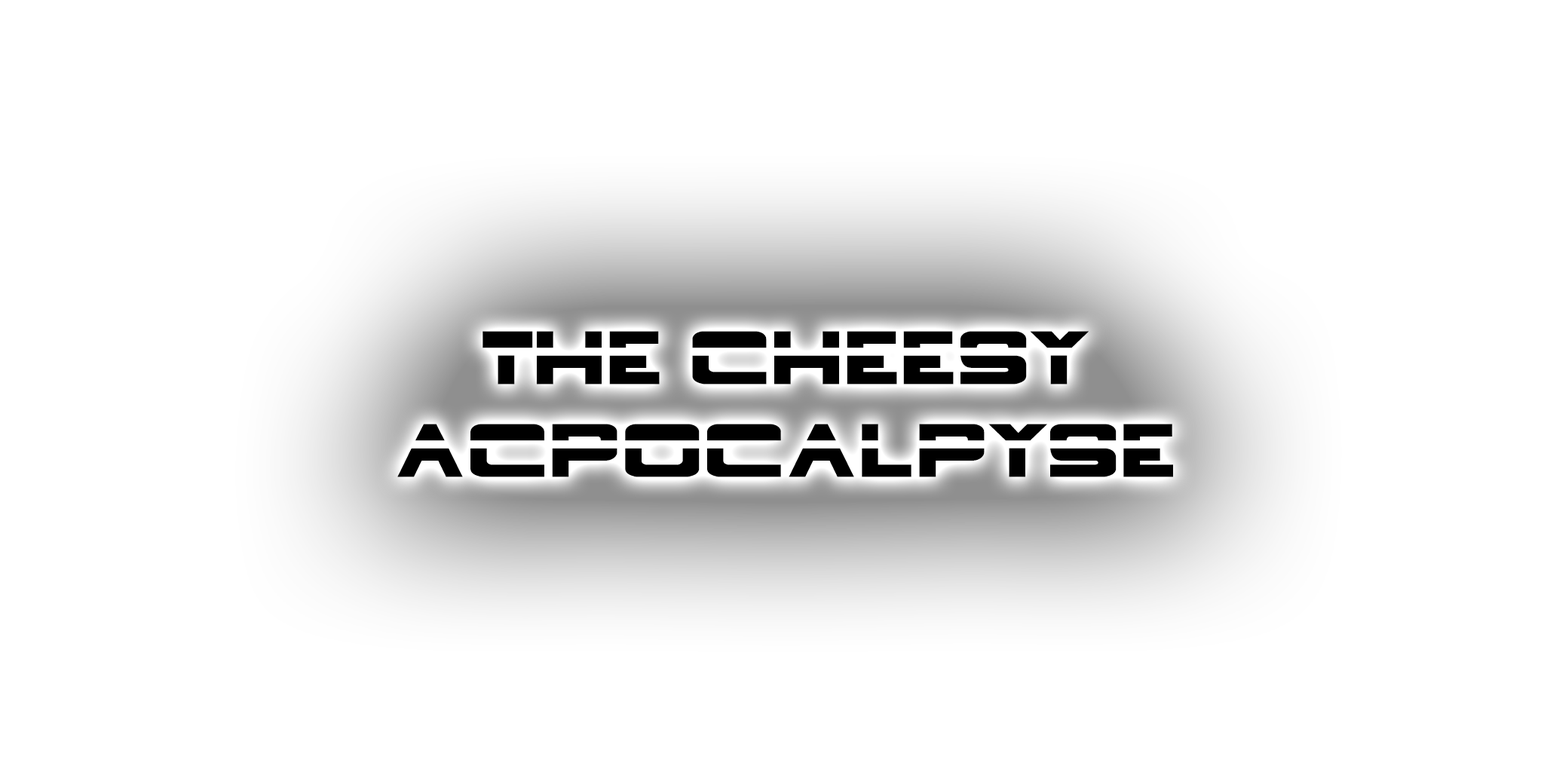
<style>
.page{position:relative;width:1544px;height:772px;background:#ffffff}
.page>*{position:absolute;margin:0}
.t1{font:77.3px "BorgNine-Regular";color:#000000}
</style>
<div class="page">
<p class="t1" style="left:397px;top:331px;width:776px;height:146px;text-align:center">The Cheesy Acpocalpyse</p>
<p class="t1" style="left:397px;top:331px;width:776px;height:146px;text-align:center">The Cheesy Acpocalpyse</p>
</div>
